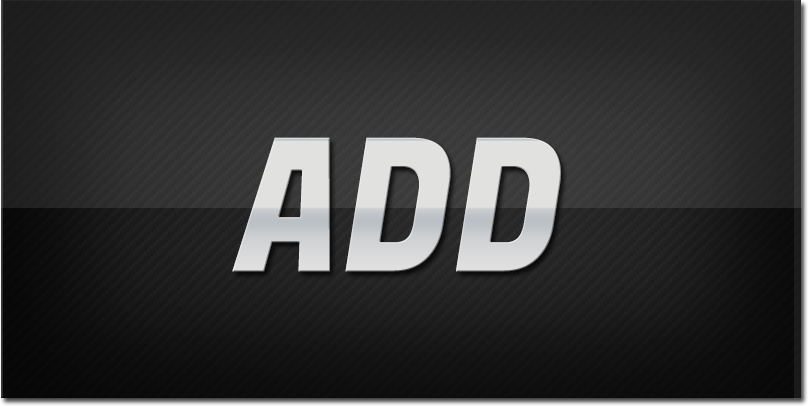
<style>
.page{position:relative;width:808px;height:406px}
.page>*{position:absolute;margin:0}
.t1{font:185.2px "FugazOne-Regular";color:#dfdfdf;scale:0.89 1}
</style>
<div class="page">
<p class="t1" style="left:232px;top:137px;width:329px;height:135px">ADD</p>
</div>
